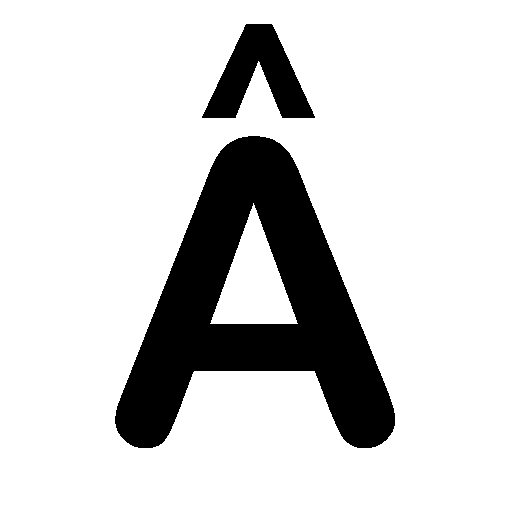
<style>
.page{position:relative;width:512px;height:512px;background:#ffffff}
.page>*{position:absolute;margin:0}
.t1{font:242.3px "ArialRoundedMTBold";color:#000000}
.t2{font:419.7px "ArialRoundedMTBold";color:#000000}
</style>
<div class="page">
<p class="t1" style="left:202px;top:24px;width:113px;height:94px">^</p>
<p class="t2" style="left:115px;top:136px;width:280px;height:312px">A</p>
</div>
